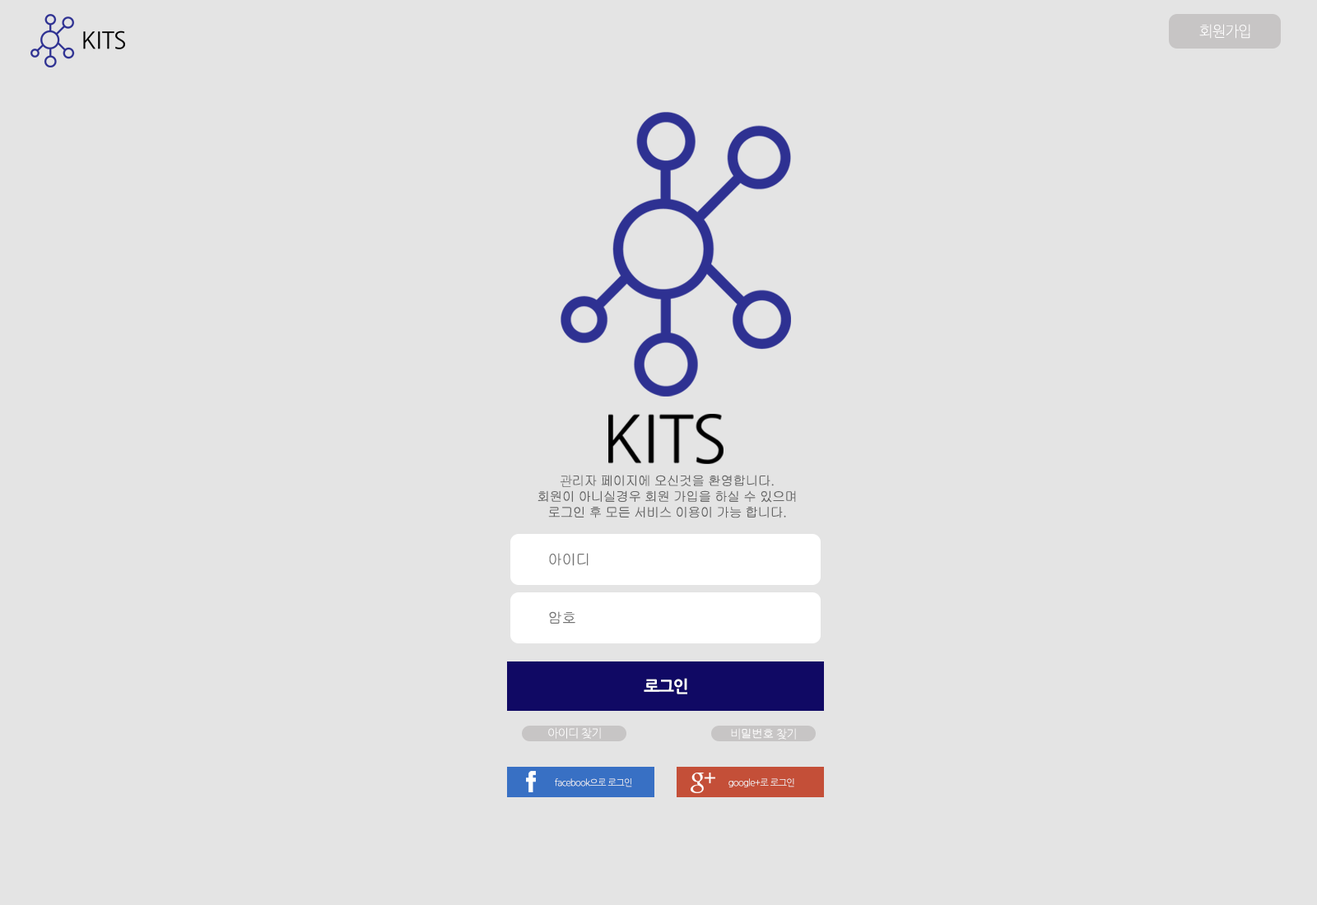
<style>
.page{position:relative;width:1317px;height:905px;background:#e4e4e4}
.page>*{position:absolute;margin:0}
.t1{font:14.7px "NanumGothicLight";letter-spacing:-0.05em;color:#ffffff}
.t2{font:13.2px "Gulim";letter-spacing:-0.05em;color:#666666}
.t3{font:13.2px "NanumGothicLight";letter-spacing:-0.05em;color:#666666}
.t4{font:14.8px "Gulim";letter-spacing:-0.05em;color:#737373}
.t5{font:16.5px "NanumGothicBold";letter-spacing:-0.05em;color:#ffffff}
.t6{font:11.5px "NanumGothicLight";letter-spacing:-0.05em;color:#ffffff}
.t7{font:11.5px "Gulim";letter-spacing:-0.05em;color:#ffffff}
.t8{font:9.1px "NanumGothicLight";letter-spacing:-0.05em;color:#f5f5f5}
</style>
<div class="page">
<p class="t1" style="left:1199px;top:24px;width:51px;height:15px">회원가입</p>
<p class="t2" style="left:537px;top:475px;width:259px;height:44px;text-align:center"><span class="t3">관</span>리자 페이지에 오신것을 환영합니다.<br>회원이 아니실경우 회원 가입을 하실 수 있으며<br>로그인 후 모든 서비스 이용이 가능 합니다.</p>
<p class="t4" style="left:549px;top:553px;width:40px;height:13px">아이디</p>
<p class="t4" style="left:549px;top:612px;width:26px;height:12px">암호</p>
<p class="t5" style="left:644px;top:678px;width:43px;height:17px">로그인</p>
<p class="t6" style="left:548px;top:728px;width:53px;height:11px">아이디 찾기</p>
<p class="t7" style="left:731px;top:728px;width:65px;height:12px"><span class="t6">비</span>밀번호<span class="t6"> 찾기</span></p>
<p class="t8" style="left:555px;top:779px;width:77px;height:9px">facebook으로 로그인</p>
<p class="t8" style="left:728px;top:779px;width:66px;height:9px">google+로 로그인</p>
</div>
